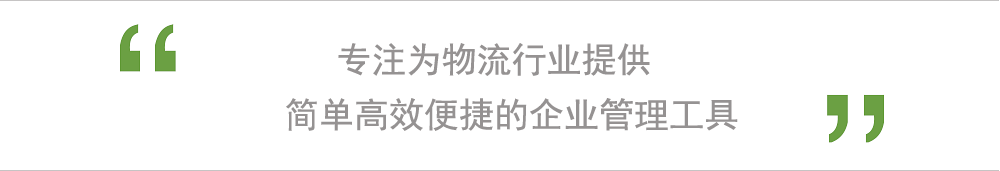
<style>
.page{position:relative;width:1000px;height:171px;background:#ffffff}
.page>*{position:absolute;margin:0}
.t1{font:35px/55px "SimHei";color:#959292}
</style>
<div class="page">
<p class="t1" style="left:286px;top:43px;width:452px;height:88px">专注为物流行业提供<br>简单高效便捷的企业管理工具</p>
</div>
